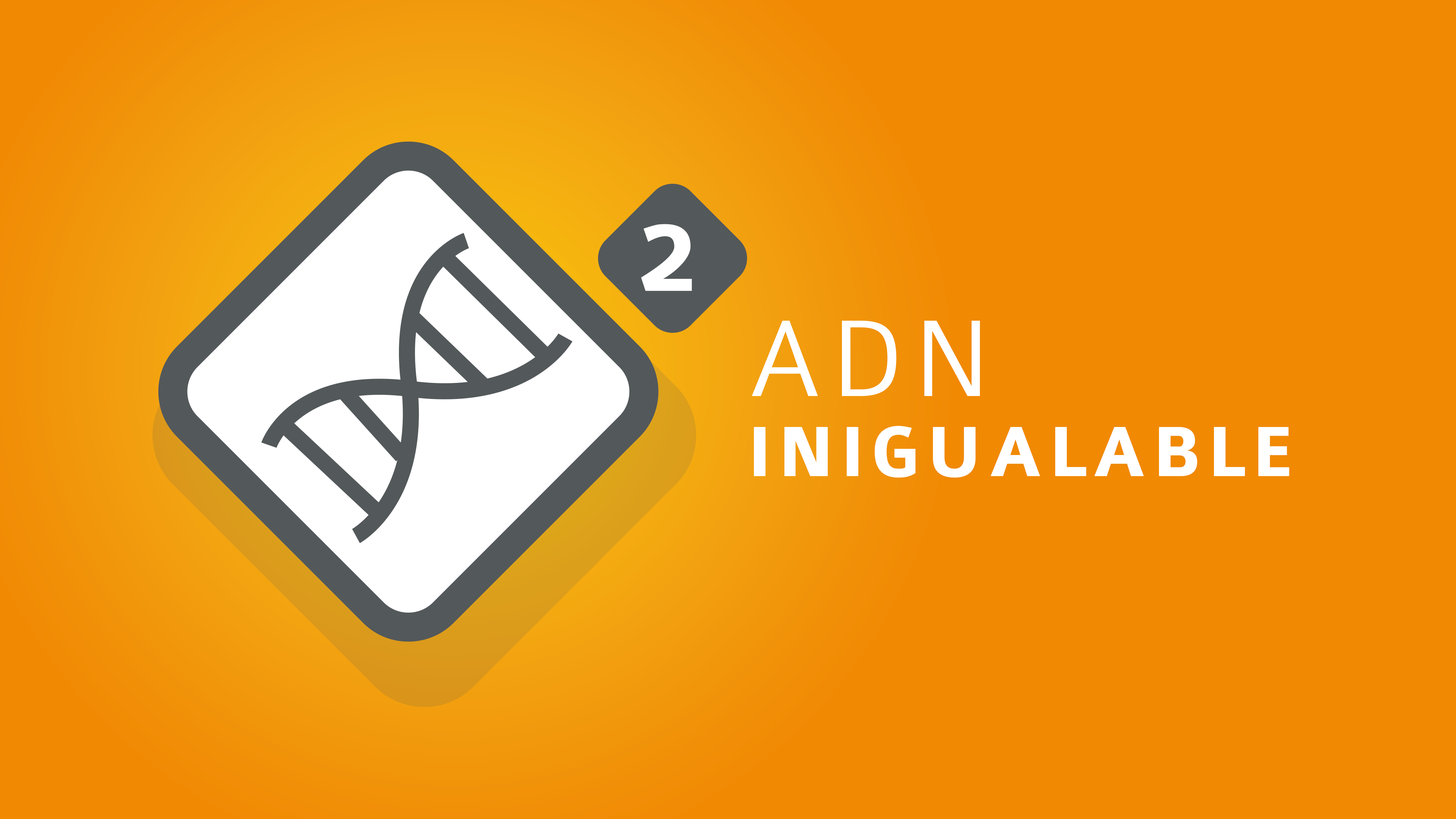
<style>
.page{position:relative;width:1456px;height:819px;background:#f18903}
.page>*{position:absolute;margin:0}
.t1{font:107.1px "Colaborate-Bold";letter-spacing:0.08em;color:#ffffff}
.t2{font:75.8px/79.9px "Colaborate-Bold";letter-spacing:0.08em;color:#ffffff}
.t3{font:116.4px/79.9px "Colaborate-Light";letter-spacing:0.08em;color:#ffffff}
</style>
<div class="page">
<p class="t1" style="left:641px;top:224px;width:51px;height:67px">2</p>
<p class="t2" style="left:752px;top:321px;width:537px;height:157px"><span class="t3">ADN<br></span>INIGUALABLE</p>
</div>
